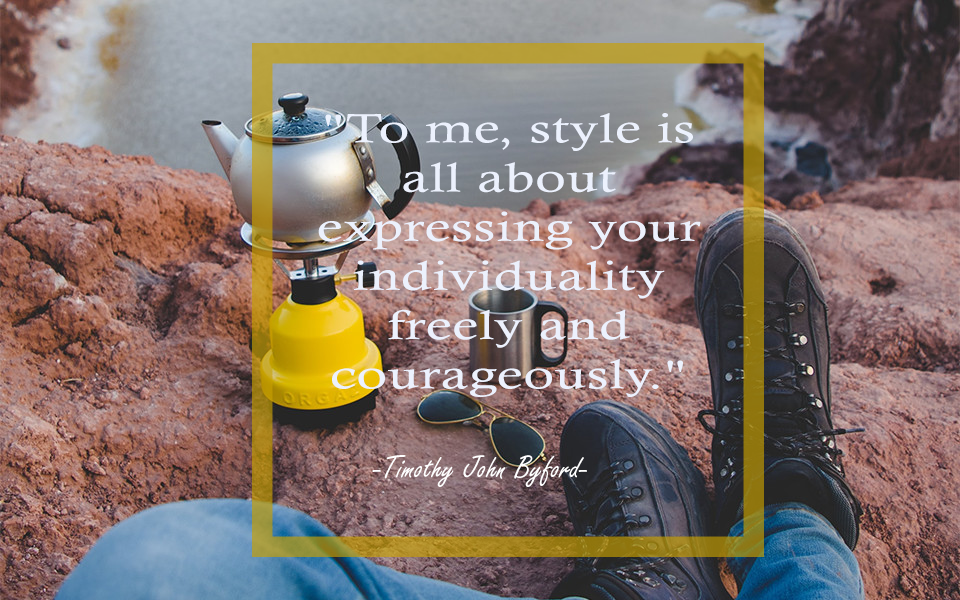
<style>
.page{position:relative;width:960px;height:600px}
.page>*{position:absolute;margin:0}
.t1{font:41px "CalistoMT";letter-spacing:0.01em;color:#ecf1fd;scale:1.39 1}
.t2{font:34px "FreestyleScript-Regular";letter-spacing:0.01em;color:#ffffff}
</style>
<div class="page">
<p class="t1" style="left:318px;top:113px;width:383px;height:284px;text-align:center">"To me, style is all about expressing your individuality freely and courageously."</p>
<p class="t2" style="left:372px;top:455px;width:215px;height:32px">-Timothy John Byford-</p>
</div>
